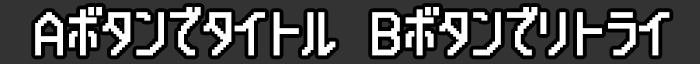
<style>
.page{position:relative;width:700px;height:64px;background:#333333}
.page>*{position:absolute;margin:0}
.t1{font:64.3px "x14y24pxHeadUpDaisy";letter-spacing:-0.07em;color:#ffffff}
</style>
<div class="page">
<p class="t1" style="left:35px;top:7px;width:635px;height:49px">Aボタンでタイトル Bボタンでリトライ</p>
</div>
